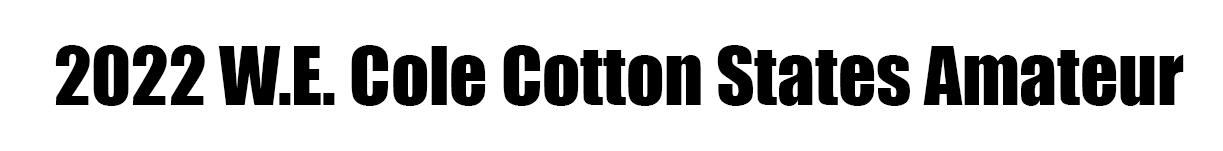
<style>
.page{position:relative;width:1223px;height:151px;background:#ffffff}
.page>*{position:absolute;margin:0}
.t1{font:128px "Impact";color:#000000}
</style>
<div class="page">
<p class="t1" style="left:55px;top:45px;width:1129px;height:61px">2022 W.E. Cole Cotton States Amateur</p>
</div>
